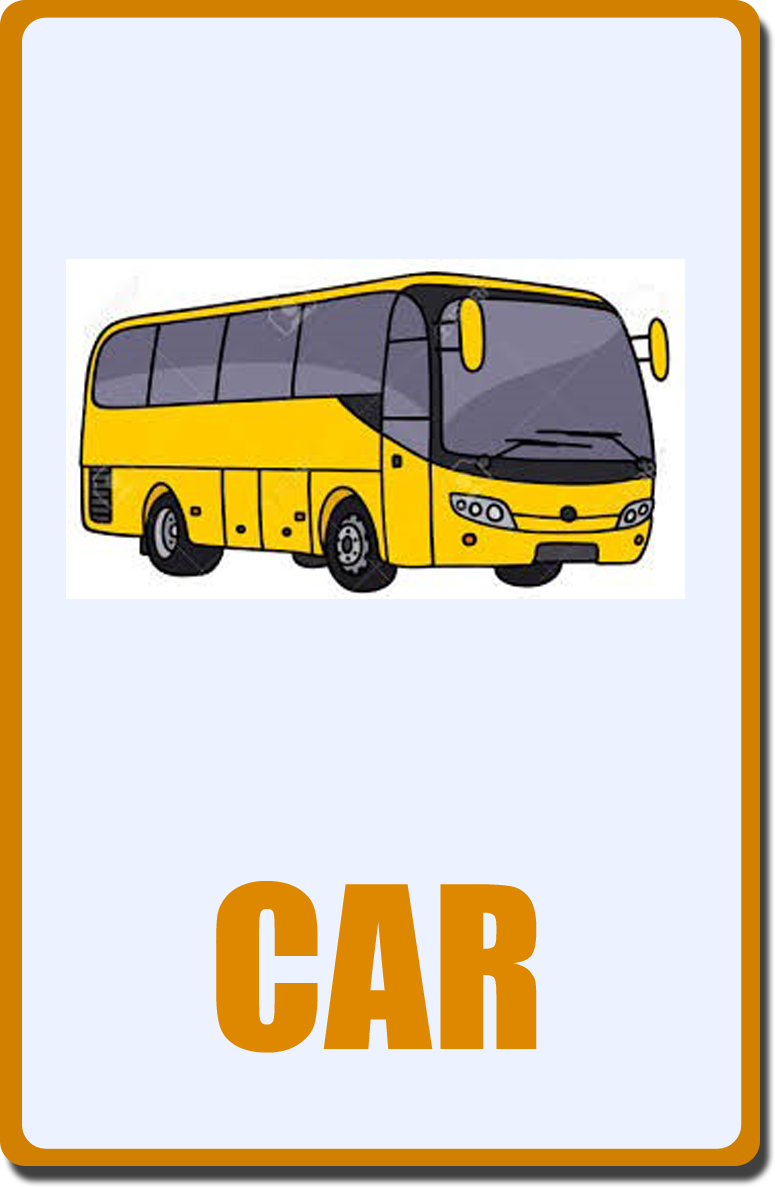
<style>
.page{position:relative;width:775px;height:1187px;background:#ecf2ff}
.page>*{position:absolute;margin:0}
.t1{font:208.3px "Impact";letter-spacing:0.005em;color:#de8800}
</style>
<div class="page">
<p class="t1" style="left:216px;top:881px;width:321px;height:172px">CAR</p>
</div>
